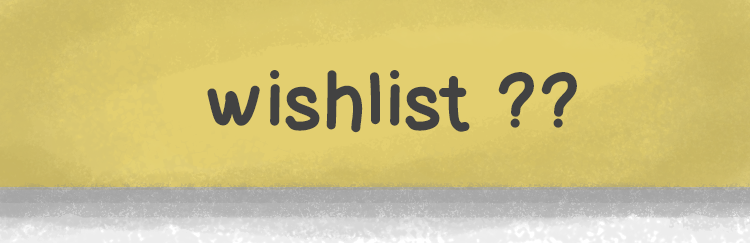
<style>
.page{position:relative;width:750px;height:243px}
.page>*{position:absolute;margin:0}
.t1{font:70px "Lettregaelle";color:#424242}
</style>
<div class="page">
<p class="t1" style="left:207px;top:70px;width:370px;height:63px">wishlist ??</p>
</div>
